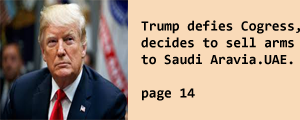
<style>
.page{position:relative;width:300px;height:120px;background:#f9dab8}
.page>*{position:absolute;margin:0}
.t1{font:14px "Consolas-Bold";color:#000000}
</style>
<div class="page">
<p class="t1" style="left:141px;top:20px;width:159px;height:81px">Trump defies Cogress,<br>decides to sell arms<br>to Saudi Aravia.UAE.<br><br>page 14</p>
</div>
